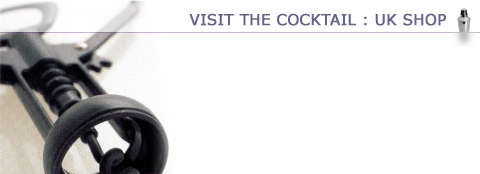
<style>
.page{position:relative;width:480px;height:174px;background:#ffffff}
.page>*{position:absolute;margin:0}
.t1{font:15px "Verdana";color:#636388;font-weight:bold}
</style>
<div class="page">
<p class="t1" style="left:189px;top:13px;width:257px;height:13px">VISIT THE COCKTAIL : UK SHOP</p>
</div>
